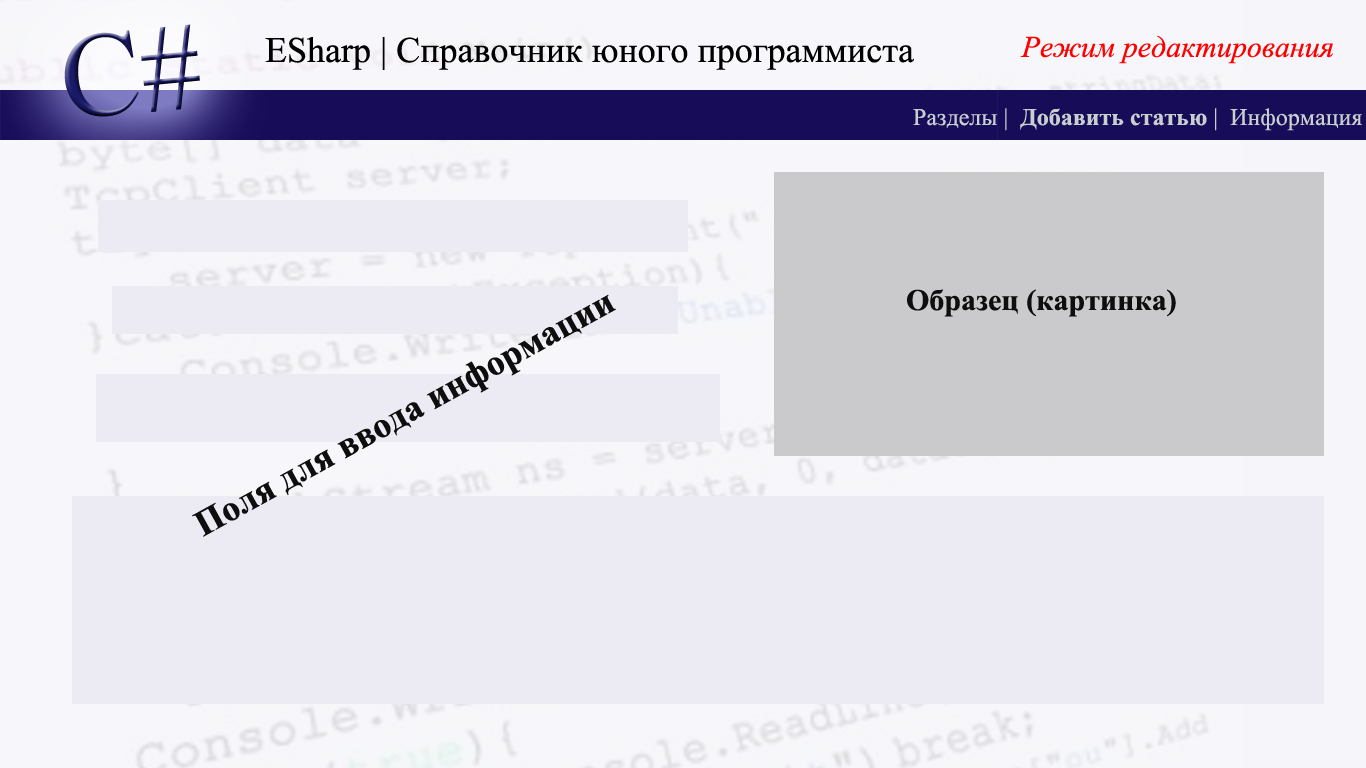
<style>
.page{position:relative;width:1366px;height:768px;background:#ecebf4}
.page>*{position:absolute;margin:0}
.t1{font:120.4px "TimesNewRomanPSMT"}
.t2{font:36px "TimesNewRomanPSMT";color:#000000}
.t3{font:30px "TimesNewRomanPS-ItalicMT";color:#ff0000}
.t4{font:24px "TimesNewRomanPS-BoldMT";color:#c9cecf}
.t5{font:24px "TimesNewRomanPSMT";color:#c9cecf}
.t6{font:36px "TimesNewRomanPS-BoldMT";color:#0e0e0e}
.t7{font:30px "TimesNewRomanPS-BoldMT";color:#0e0e0e}
</style>
<div class="page">
<p class="t1" style="left:64px;top:24px;width:136px;height:93px;rotate:-5deg">C#</p>
<p class="t2" style="left:265px;top:37px;width:649px;height:33px">ESharp | Справочник юного программиста</p>
<p class="t3" style="left:1020px;top:35px;width:313px;height:29px">Режим редактирования</p>
<p class="t4" style="left:913px;top:108px;width:449px;height:23px"><span class="t5">Разделы |  </span>Добавить статью<span class="t5"> |  Информация</span></p>
<p class="t6" style="left:192px;top:294px;width:424px;height:243px;rotate:-29deg">Поля для ввода информации</p>
<p class="t7" style="left:907px;top:289px;width:269px;height:28px">Образец (картинка)</p>
</div>
